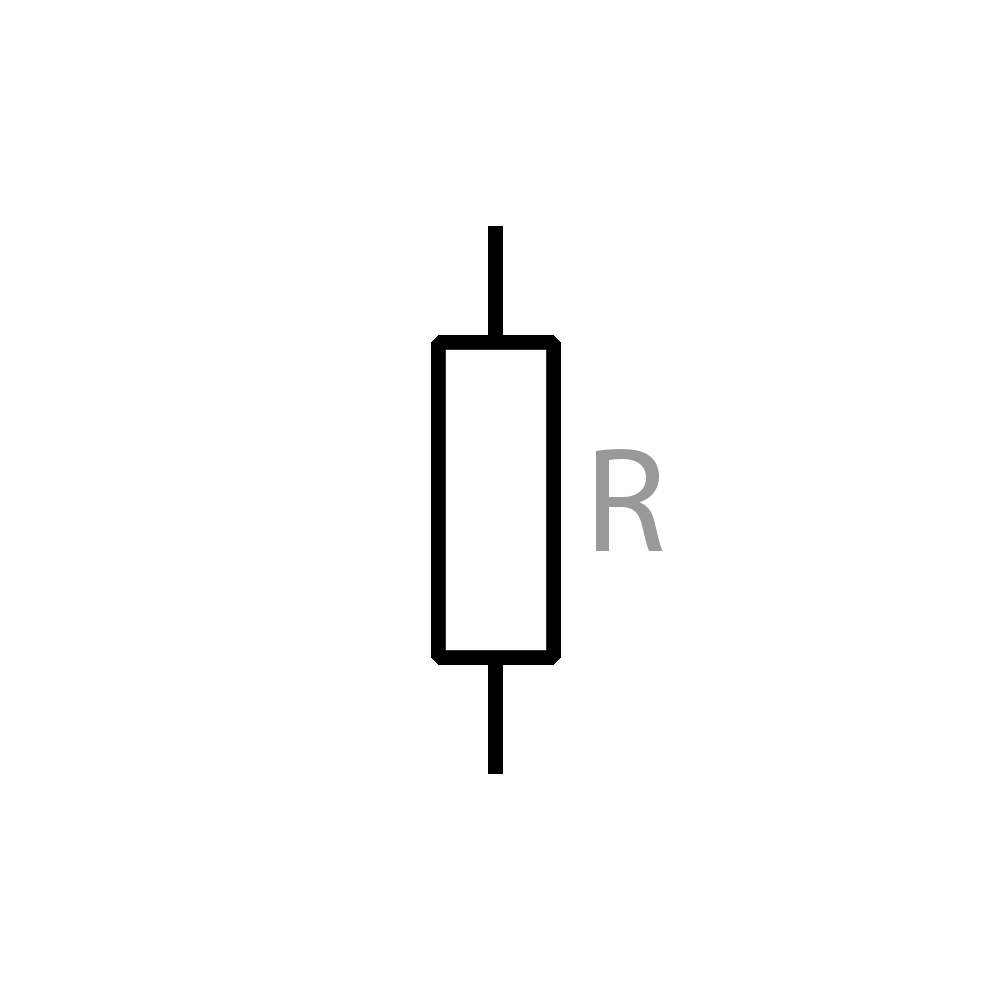
<style>
.page{position:relative;width:1000px;height:1000px;background:#ffffff}
.page>*{position:absolute;margin:0}
.t1{font:150.2px "MyriadPro-Regular";color:#999999}
</style>
<div class="page">
<p class="t1" style="left:596px;top:449px;width:67px;height:102px">R</p>
</div>
